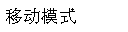
<style>
.page{position:relative;width:128px;height:32px;background:#ffffff}
.page>*{position:absolute;margin:0}
.t1{font:18px "AdobeHeitiStd-Regular";color:#000000}
</style>
<div class="page">
<p class="t1" style="left:6px;top:8px;width:70px;height:16px">移动模式</p>
</div>
